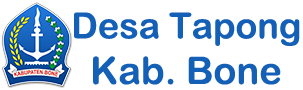
<style>
.page{position:relative;width:303px;height:90px;background:#ffffff}
.page>*{position:absolute;margin:0}
.t1{font:36px "ArialRoundedMTBold";color:#1560b7}
.t2{font:38px "ArialRoundedMTBold";color:#1560b7}
</style>
<div class="page">
<p class="t1" style="left:74px;top:12px;width:226px;height:34px">Desa Tapong</p>
<p class="t2" style="left:93px;top:56px;width:188px;height:29px">Kab. Bone</p>
</div>
